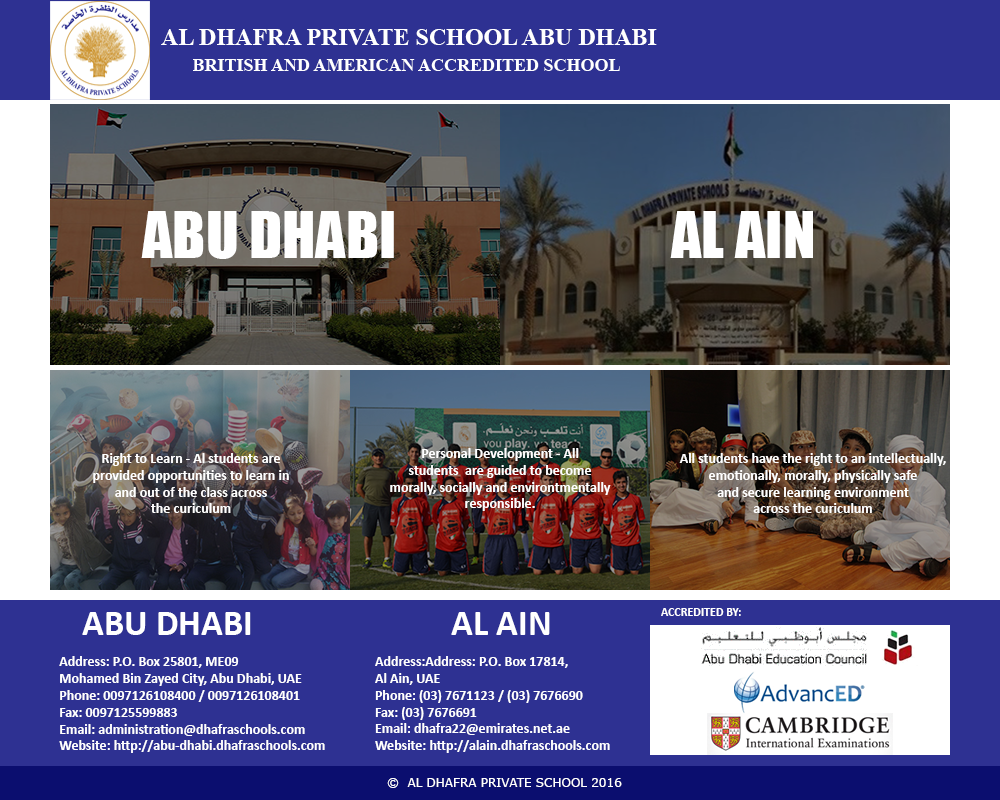
<style>
.page{position:relative;width:1000px;height:800px;background:#2e3192}
.page>*{position:absolute;margin:0}
.t1{font:24px "TimesNewRomanPS-BoldMT";color:#ffffff}
.t2{font:18px "TimesNewRomanPS-BoldMT";color:#ffffff}
.t3{font:60px "Impact";color:#ffffff}
.t4{font:14px "Calibri-Bold";color:#ffffff}
.t5{font:36px "Calibri-Bold";color:#ffffff}
.t6{font:12px "Calibri-Bold";color:#ffffff}
.t7{font:12px "Verdana";color:#ffffff}
</style>
<div class="page">
<p class="t1" style="left:161px;top:29px;width:496px;height:16px">AL DHAFRA PRIVATE SCHOOL ABU DHABI</p>
<p class="t2" style="left:193px;top:59px;width:427px;height:12px">BRITISH AND AMERICAN ACCREDITED SCHOOL</p>
<p class="t3" style="left:141px;top:211px;width:253px;height:48px">ABU DHABI</p>
<p class="t3" style="left:670px;top:211px;width:143px;height:47px">AL AIN</p>
<p class="t4" style="left:390px;top:448px;width:221px;height:63px;text-align:center">Personal Development - All<br>students  are guided to become<br>morally, socially and environtmentally<br>responsible.</p>
<p class="t4" style="left:93px;top:453px;width:196px;height:60px;text-align:center">Right to Learn - Al students are<br>provided opportunities to learn in<br>and out of the class across<br>the curiculum</p>
<p class="t4" style="left:679px;top:453px;width:267px;height:60px;text-align:center">All students have the right to an intellectually,<br>emotionally, morally, physically safe<br>and secure learning environment<br>across the curiculum</p>
<p class="t5" style="left:82px;top:612px;width:169px;height:23px">ABU DHABI</p>
<p class="t5" style="left:451px;top:612px;width:99px;height:23px">AL AIN</p>
<p class="t6" style="left:661px;top:608px;width:80px;height:8px">ACCREDITED BY:</p>
<p class="t4" style="left:59px;top:656px;width:266px;height:97px">Address: P.O. Box 25801, ME09 <br>Mohamed Bin Zayed City, Abu Dhabi, UAE<br>Phone: 0097126108400 / 0097126108401<br>Fax: 0097125599883<br>Email: administration@dhafraschools.com<br>Website: http://abu-dhabi.dhafraschools.com</p>
<p class="t4" style="left:375px;top:656px;width:235px;height:97px">Address:Address: P.O. Box 17814,<br>Al Ain, UAE<br>Phone: (03) 7671123 / (03) 7676690<br>Fax: (03) 7676691<br>Email: dhafra22@emirates.net.ae<br>Website: http://alain.dhafraschools.com</p>
<p class="t7" style="left:387px;top:778px;width:235px;height:10px">©  AL DHAFRA PRIVATE SCHOOL 2016</p>
</div>
